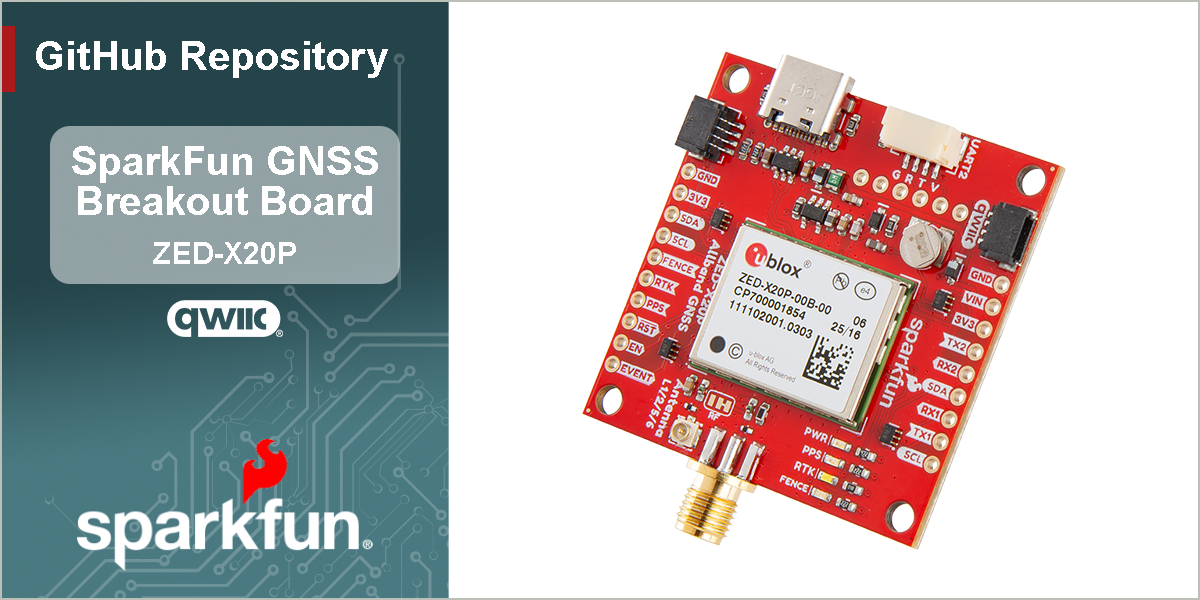
<style>
.page{position:relative;width:1200px;height:600px;background:#ffffff}
.page>*{position:absolute;margin:0}
.t1{font:40px "Arial-BoldMT";color:#ffffff}
.t2{font:30px "Arial-BoldMT";color:#ffffff}
</style>
<div class="page">
<p class="t1" style="left:36px;top:41px;width:352px;height:37px">GitHub Repository</p>
<p class="t1" style="left:72px;top:146px;width:306px;height:69px;text-align:center">SparkFun GNSS<br>Breakout Board</p>
<p class="t2" style="left:153px;top:242px;width:143px;height:22px">ZED-X20P</p>
</div>
